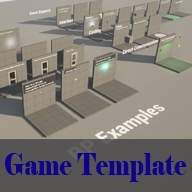
<style>
.page{position:relative;width:192px;height:192px}
.page>*{position:absolute;margin:0}
.t1{font:30.2px "Elephant-Regular";color:#10008b;scale:0.76 1}
</style>
<div class="page">
<p class="t1" style="left:5px;top:153px;width:182px;height:29px">Game Template</p>
</div>
